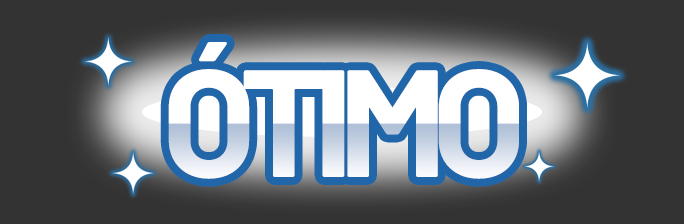
<style>
.page{position:relative;width:684px;height:224px;background:#333333}
.page>*{position:absolute;margin:0}
.t1{font:152px "Barlow-Bold";letter-spacing:-0.1em;color:#ffffff}
</style>
<div class="page">
<p class="t1" style="left:168px;top:42px;width:351px;height:137px">ÓTIMO</p>
</div>
